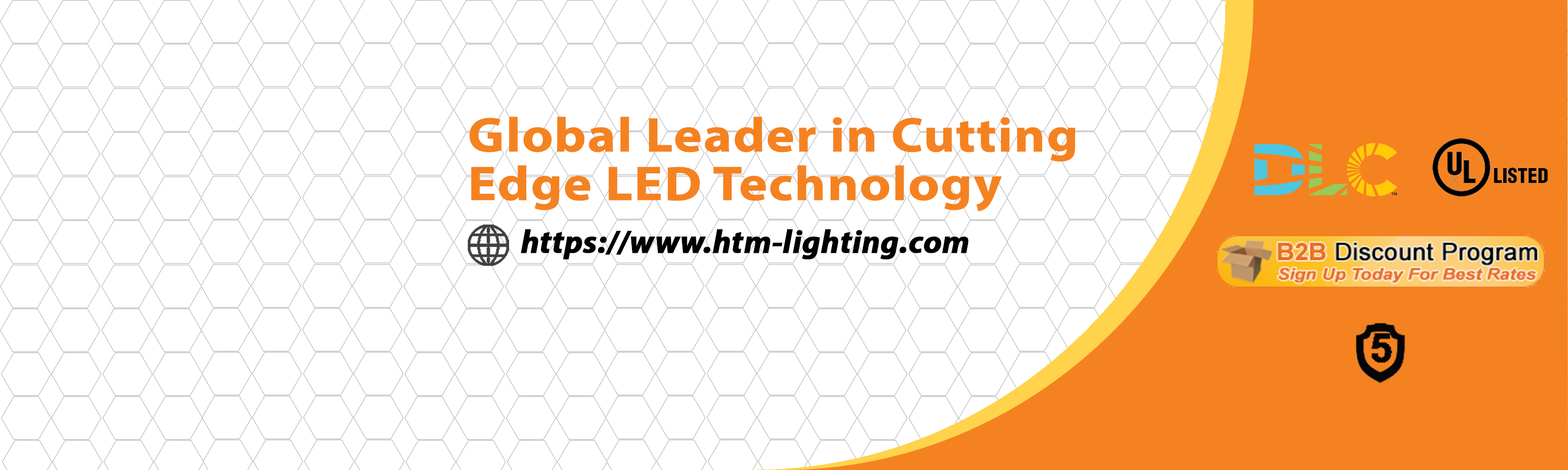
<style>
.page{position:relative;width:1568px;height:470px;background:#ffffff}
.page>*{position:absolute;margin:0}
.t1{font:48.5px/48.5px "MyriadPro-Bold";color:#f58220;font-weight:bold;scale:1.1 1}
.t2{font:32.4px "MyriadPro-BoldIt";color:#000000;font-weight:bold}
</style>
<div class="page">
<p class="t1" style="left:469px;top:117px;width:607px;height:95px">Global Leader in Cutting <br>Edge LED Technology</p>
<p class="t2" style="left:521px;top:229px;width:448px;height:31px">https://www.htm-lighting.com</p>
</div>
